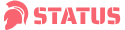
<style>
.page{position:relative;width:125px;height:30px;background:#ffffff}
.page>*{position:absolute;margin:0}
.t1{font:24px "SairaStencilOne-Regular";color:#f86570;text-transform:uppercase}
</style>
<div class="page">
<p class="t1" style="left:33px;top:7px;width:88px;height:18px">STATUS</p>
</div>
